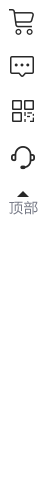
<style>
.page{position:relative;width:45px;height:500px;background:#ffffff}
.page>*{position:absolute;margin:0}
.t1{font:14px "MicrosoftYaHei";letter-spacing:0.05em;color:#787b87}
</style>
<div class="page">
<p class="t1" style="left:9px;top:201px;width:29px;height:14px">顶部</p>
</div>
